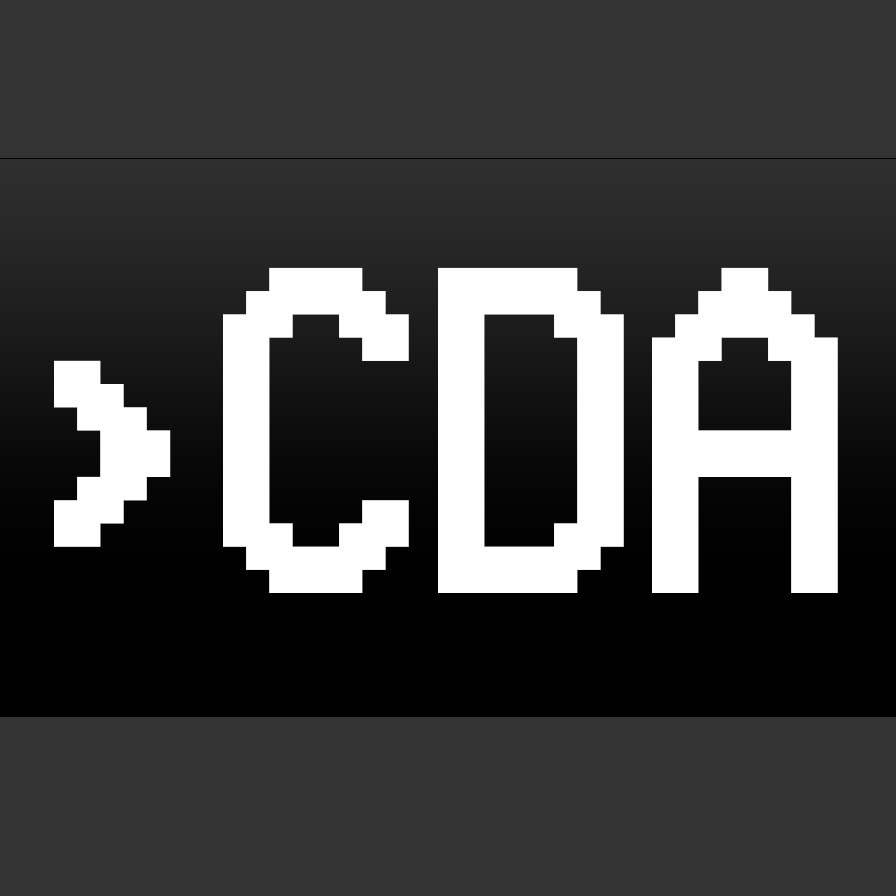
<style>
.page{position:relative;width:896px;height:896px;background:#333333}
.page>*{position:absolute;margin:0}
.t1{font:394.8px "EASVHS";color:#ffffff}
</style>
<div class="page">
<p class="t1" style="left:54px;top:267px;width:784px;height:326px">&gt; CDA</p>
</div>
